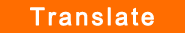
<style>
.page{position:relative;width:185px;height:33px;background:#ff6d00}
.page>*{position:absolute;margin:0}
.t1{font:24px "ArialMT";letter-spacing:0.1em;color:#ffffff;font-weight:bold}
</style>
<div class="page">
<p class="t1" style="left:30px;top:7px;width:124px;height:19px">Translate</p>
</div>
